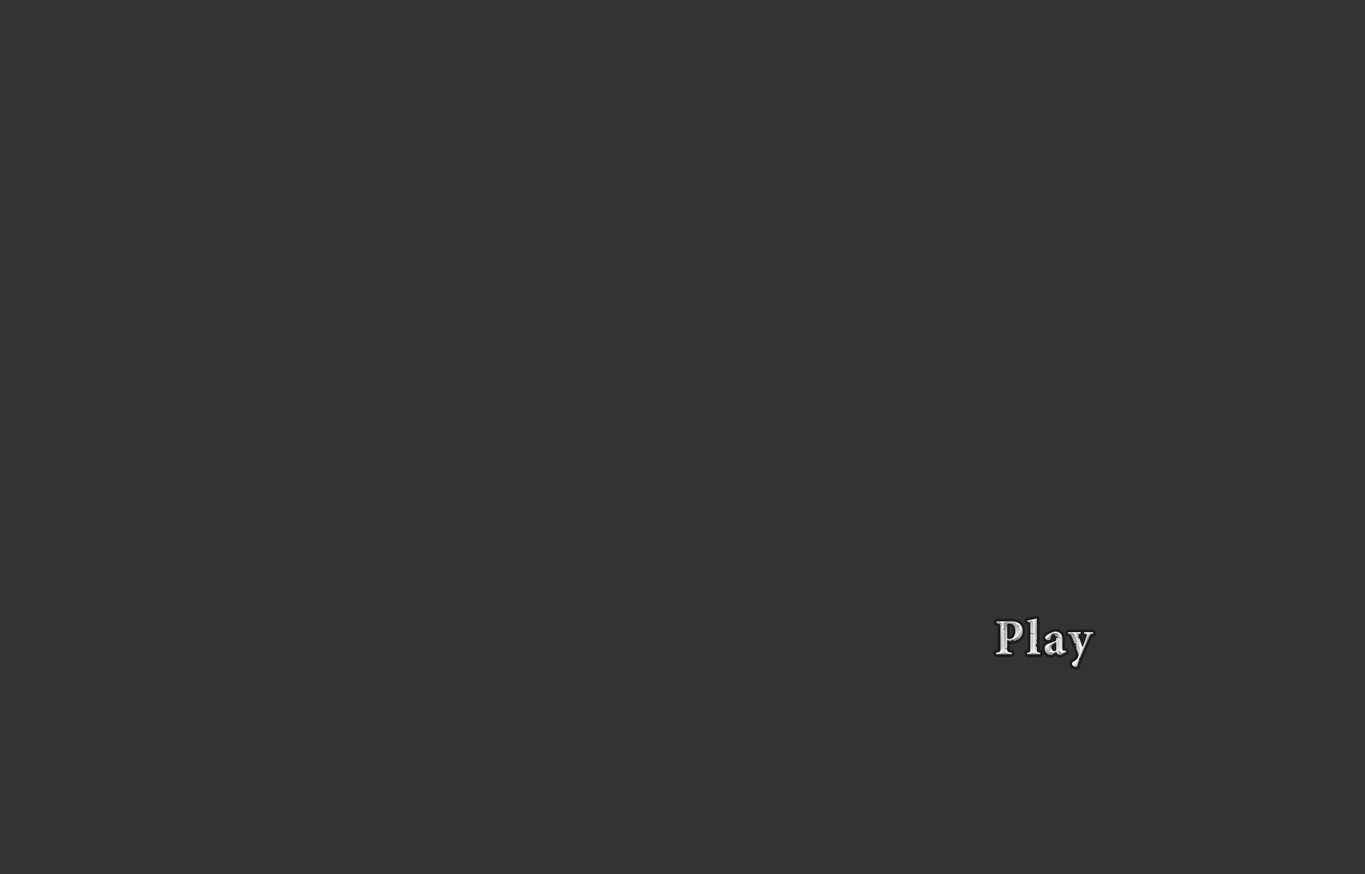
<style>
.page{position:relative;width:1365px;height:874px;background:#333333}
.page>*{position:absolute;margin:0}
.t1{font:50.6px "MinionPro-Bold";letter-spacing:0.05em}
</style>
<div class="page">
<p class="t1" style="left:996px;top:618px;width:97px;height:49px">Play</p>
</div>
